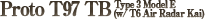
<style>
.page{position:relative;width:205px;height:19px;background:#ffffff}
.page>*{position:absolute;margin:0}
.t1{font:20px "RyuminPro-ExBold";letter-spacing:-0.08em;color:#4a3f32;font-weight:bold;scale:0.9 1}
.t2{font:10px "RyuminPro-ExBold";letter-spacing:-0.08em;color:#4a3f32;font-weight:bold;scale:0.9 1}
</style>
<div class="page">
<p class="t1" style="left:0px;top:1px;width:112px;height:16px">Proto T97 TB</p>
<p class="t2" style="left:114px;top:0px;width:62px;height:11px">Type 3 Model E</p>
<p class="t2" style="left:114px;top:9px;width:91px;height:11px">(w/ T6 Air Radar Kai)</p>
</div>
